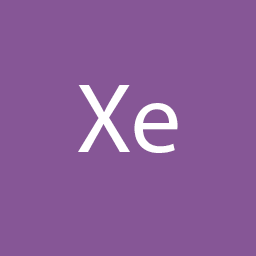
<style>
.page{position:relative;width:256px;height:256px;background:#865696}
.page>*{position:absolute;margin:0}
.t1{font:100px "MyriadPro-Regular";color:#ffffff}
</style>
<div class="page">
<p class="t1" style="left:78px;top:85px;width:100px;height:68px">Xe</p>
</div>
